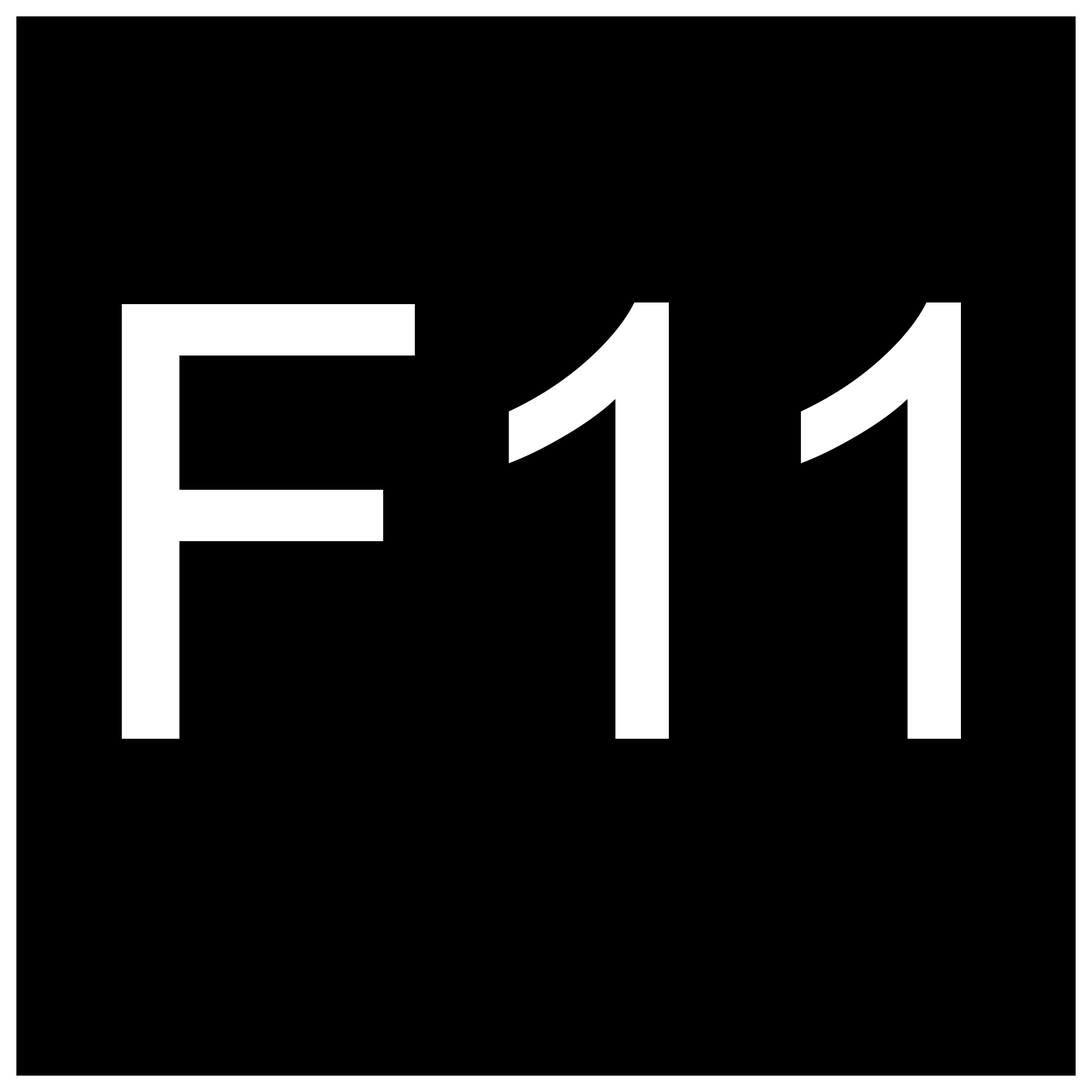
<style>
.page{position:relative;width:1092px;height:1092px;background:#000000}
.page>*{position:absolute;margin:0}
.t1{font:606.7px "ArialMT";color:#ffffff}
</style>
<div class="page">
<p class="t1" style="left:122px;top:302px;width:839px;height:437px">F11</p>
</div>
